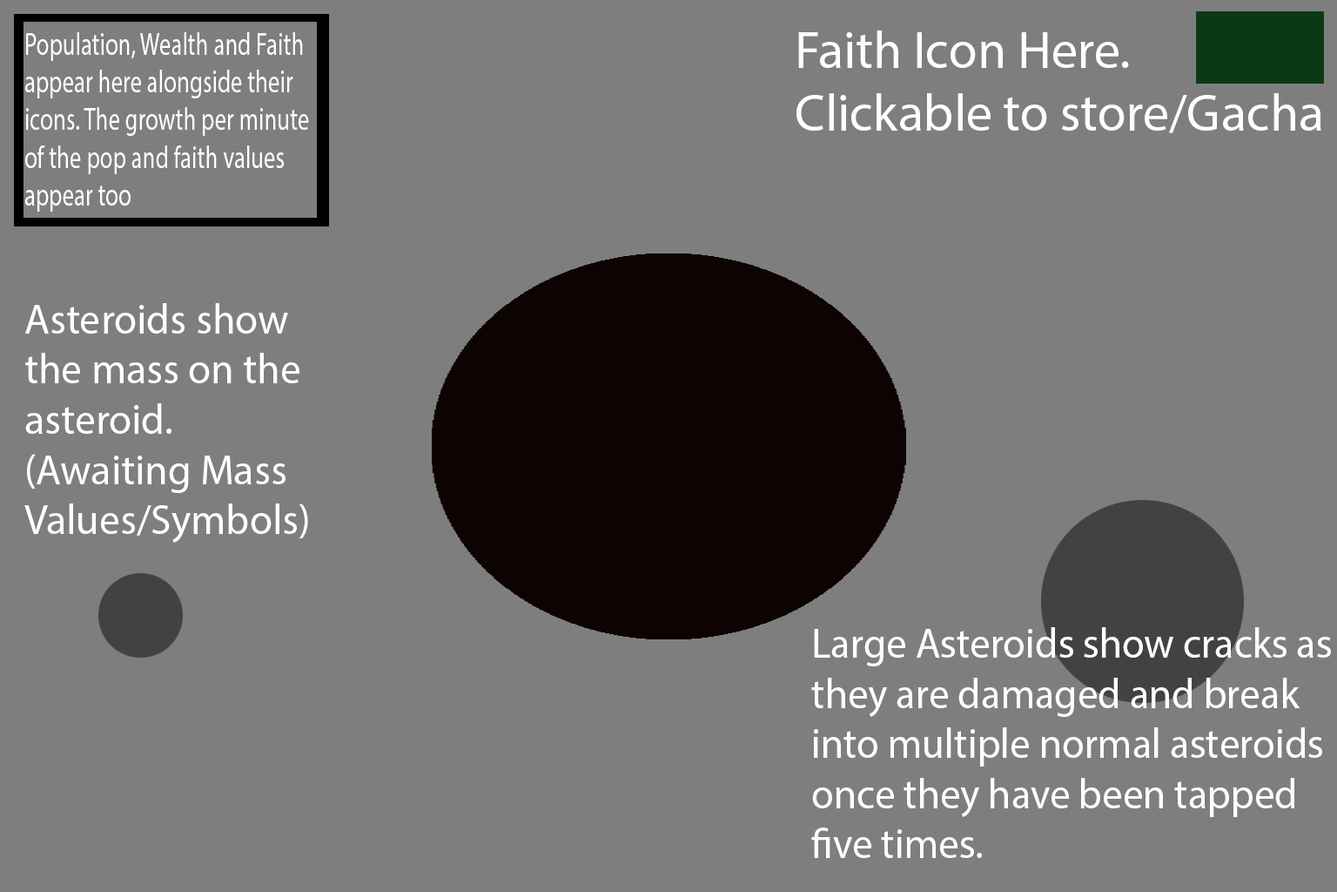
<style>
.page{position:relative;width:1337px;height:892px;background:#7e7e7e}
.page>*{position:absolute;margin:0}
.t1{font:31.3px "MyriadPro-Regular";color:#ffffff;scale:0.75 1}
.t2{font:52.2px "MyriadPro-Regular";color:#ffffff}
.t3{font:41.8px "MyriadPro-Regular";color:#ffffff}
</style>
<div class="page">
<p class="t1" style="left:25px;top:32px;width:284px;height:180px">Population, Wealth and Faith appear here alongside their icons. The growth per minute of the pop and faith values appear too</p>
<p class="t2" style="left:797px;top:30px;width:525px;height:103px">Faith Icon Here.<br>Clickable to store/Gacha</p>
<p class="t3" style="left:24px;top:303px;width:284px;height:239px">Asteroids show the mass on the asteroid. (Awaiting Mass Values/Symbols)</p>
<p class="t3" style="left:811px;top:627px;width:520px;height:231px">Large Asteroids show cracks as they are damaged and break into multiple normal asteroids once they have been tapped five times.</p>
</div>
